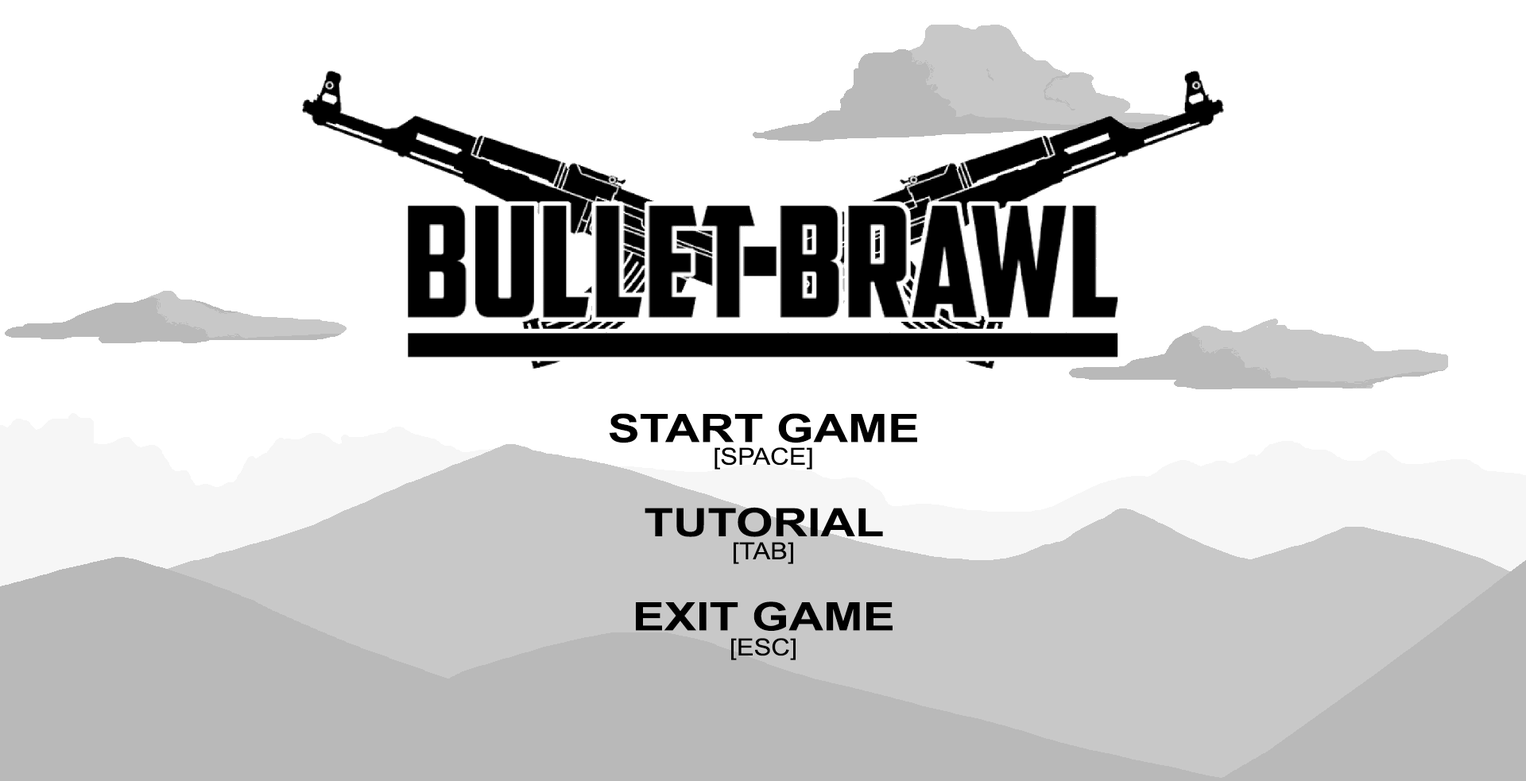
<style>
.page{position:relative;width:1526px;height:781px;background:#ffffff}
.page>*{position:absolute;margin:0}
.t1{font:39.2px "Arial-BoldMT";color:#000000;scale:1.22 1}
.t2{font:23.5px "ArialNarrow";color:#000000;scale:1.35 1}
</style>
<div class="page">
<p class="t1" style="left:609px;top:413px;width:308px;height:218px;text-align:center">START GAME<br><br>TUTORIAL<br><br>EXIT GAME</p>
<p class="t2" style="left:715px;top:448px;width:97px;height:22px">[SPACE]</p>
<p class="t2" style="left:734px;top:542px;width:59px;height:22px">[TAB]</p>
<p class="t2" style="left:731px;top:638px;width:65px;height:23px">[ESC]</p>
</div>
